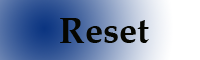
<style>
.page{position:relative;width:200px;height:60px}
.page>*{position:absolute;margin:0}
.t1{font:36px "PalatinoLinotype-Bold";color:#060600}
</style>
<div class="page">
<p class="t1" style="left:60px;top:18px;width:89px;height:25px">Reset</p>
</div>
